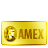
<style>
.page{position:relative;width:48px;height:48px;background:#ffffff}
.page>*{position:absolute;margin:0}
.t1{font:13.6px "MyriadPro-BoldCond"}
</style>
<div class="page">
<p class="t1" style="left:18px;top:29px;width:26px;height:10px">AMEX</p>
<p class="t1" style="left:18px;top:29px;width:26px;height:10px">AMEX</p>
</div>
